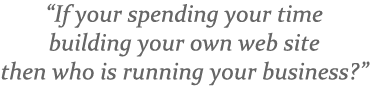
<style>
.page{position:relative;width:370px;height:89px;background:#ffffff}
.page>*{position:absolute;margin:0}
.t1{font:24px "Constantia-Italic";color:#666666}
</style>
<div class="page">
<p class="t1" style="left:1px;top:3px;width:369px;height:83px;text-align:center">“If your spending your time<br>building your own web site<br>then who is running your business?”</p>
</div>
